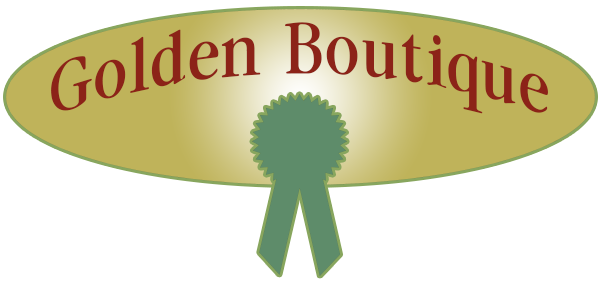
<style>
.page{position:relative;width:600px;height:286px;background:#ffffff}
.page>*{position:absolute;margin:0}
.t1{font:68.1px "GaramondCondBook";color:#8c2318}
</style>
<div class="page">
<p class="t1" style="left:51px;top:22px;width:497px;height:92px">Golden Boutique</p>
</div>
